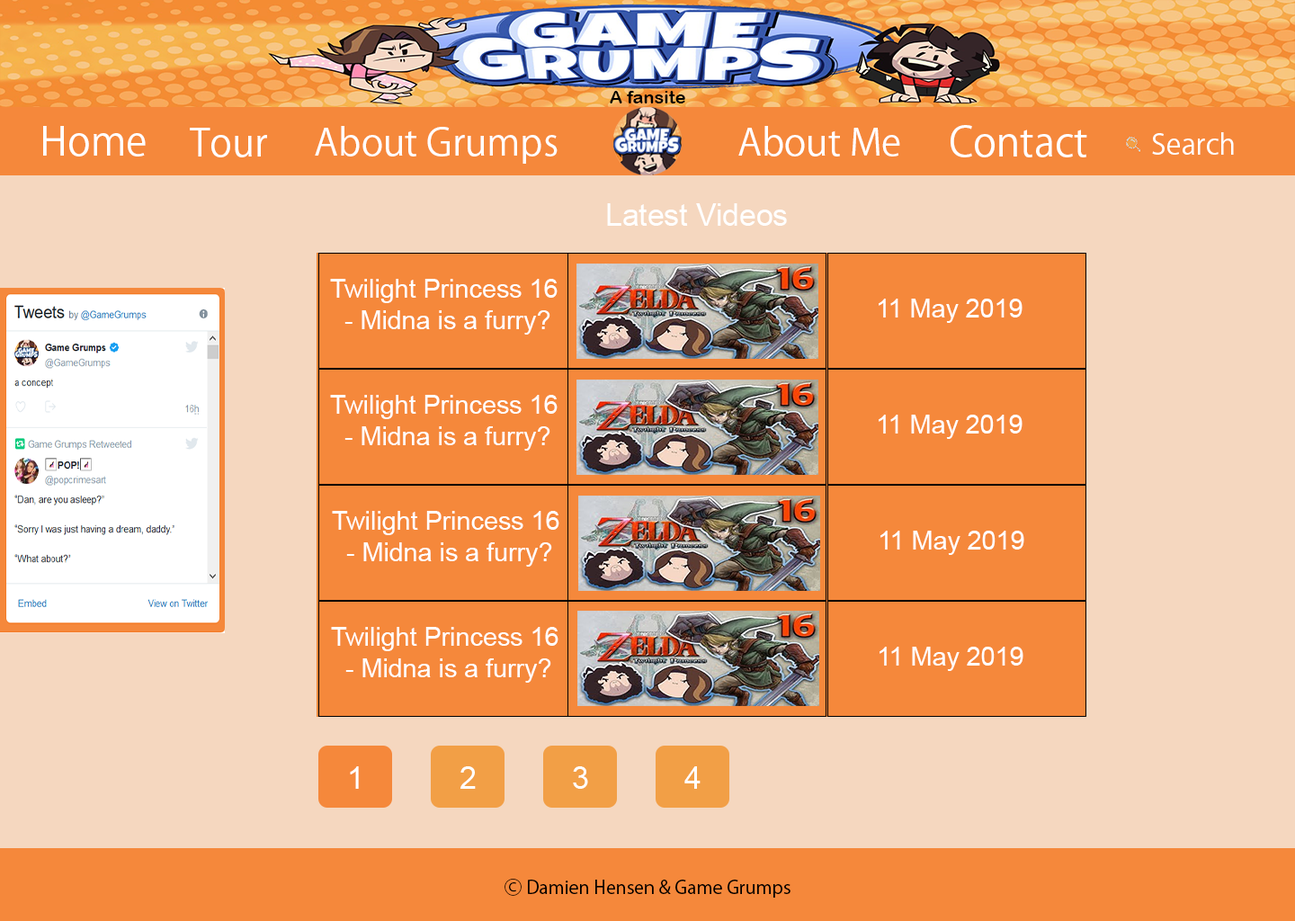
<style>
.page{position:relative;width:1295px;height:921px;background:#f5d7bf}
.page>*{position:absolute;margin:0}
.t1{font:18px "ArialRoundedMTBold";color:#000000}
.t2{font:39.4px "KozGoPr6N-Regular";color:#ffffff}
.t3{font:37px "KozGoPr6N-Regular";color:#ffffff}
.t4{font:39.6px "KozGoPr6N-Regular";color:#ffffff}
.t5{font:38.1px "KozGoPr6N-Regular";color:#ffffff}
.t6{font:28.3px "KozGoPr6N-Regular";color:#ffffff}
.t7{font:30.3px "ArialMT";color:#ffffff}
.t8{font:25.8px "ArialMT";color:#ffffff}
.t9{font:18px "KozGoPr6N-Regular";color:#000000}
</style>
<div class="page">
<p class="t1" style="left:610px;top:91px;width:75px;height:12px">A fansite</p>
<p class="t2" style="left:43px;top:126px;width:103px;height:30px">Home</p>
<p class="t3" style="left:315px;top:126px;width:243px;height:38px">About Grumps</p>
<p class="t3" style="left:738px;top:126px;width:162px;height:30px">About Me</p>
<p class="t4" style="left:951px;top:125px;width:136px;height:32px">Contact</p>
<p class="t5" style="left:190px;top:128px;width:77px;height:29px">Tour</p>
<p class="t6" style="left:1152px;top:132px;width:82px;height:23px">Search</p>
<p class="t7" style="left:607px;top:203px;width:180px;height:23px">Latest Videos</p>
<p class="t8" style="left:330px;top:279px;width:228px;height:56px;text-align:center">Twilight Princess 16 <br>- Midna is a furry?</p>
<p class="t8" style="left:879px;top:299px;width:143px;height:24px">11 May 2019</p>
<p class="t8" style="left:330px;top:395px;width:228px;height:56px;text-align:center">Twilight Princess 16 <br>- Midna is a furry?</p>
<p class="t8" style="left:879px;top:415px;width:143px;height:24px">11 May 2019</p>
<p class="t8" style="left:332px;top:511px;width:227px;height:56px;text-align:center">Twilight Princess 16 <br>- Midna is a furry?</p>
<p class="t8" style="left:880px;top:531px;width:144px;height:24px">11 May 2019</p>
<p class="t8" style="left:331px;top:627px;width:227px;height:56px;text-align:center">Twilight Princess 16 <br>- Midna is a furry?</p>
<p class="t8" style="left:879px;top:647px;width:144px;height:24px">11 May 2019</p>
<p class="t7" style="left:350px;top:766px;width:9px;height:23px">1</p>
<p class="t7" style="left:460px;top:766px;width:16px;height:23px">2</p>
<p class="t7" style="left:573px;top:766px;width:15px;height:23px">3</p>
<p class="t7" style="left:684px;top:766px;width:17px;height:23px">4</p>
<p class="t9" style="left:504px;top:879px;width:286px;height:18px">Ⓒ Damien Hensen &amp; Game Grumps</p>
</div>
